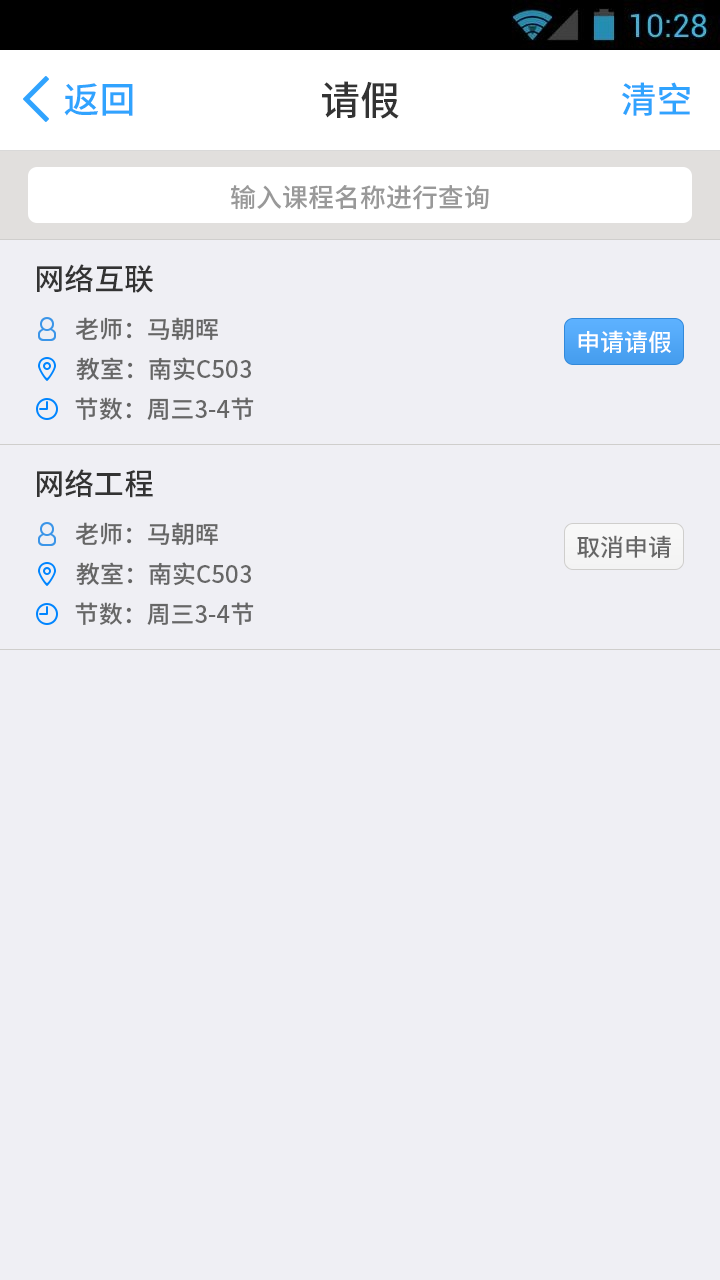
<style>
.page{position:relative;width:720px;height:1280px;background:#efeff4}
.page>*{position:absolute;margin:0}
.t1{font:36.1px "NotoSansHans-Medium";color:#30a3fe}
.t2{font:40px "NotoSansHans-Medium";color:#333333}
.t3{font:26px "NotoSansHans-Medium";color:#999999}
.t4{font:30px "NotoSansHans-Medium";color:#333333}
.t5{font:24px "NotoSansHans-Medium";color:#666666}
.t6{font:23.9px "NotoSansHans-Medium";color:#ffffff}
.t7{font:23.9px "NotoSansHans-Medium";color:#666666}
</style>
<div class="page">
<p class="t1" style="left:64px;top:83px;width:69px;height:33px">返回</p>
<p class="t2" style="left:322px;top:81px;width:77px;height:38px">请假</p>
<p class="t1" style="left:621px;top:82px;width:69px;height:34px">清空</p>
<p class="t3" style="left:231px;top:185px;width:258px;height:25px">输入课程名称进行查询</p>
<p class="t4" style="left:37px;top:264px;width:116px;height:29px">网络互联</p>
<p class="t5" style="left:75px;top:317px;width:143px;height:23px">老师：马朝晖</p>
<p class="t6" style="left:578px;top:330px;width:93px;height:23px">申请请假</p>
<p class="t5" style="left:76px;top:357px;width:175px;height:24px">教室：南实C503</p>
<p class="t5" style="left:75px;top:397px;width:179px;height:23px">节数：周三3-4节</p>
<p class="t4" style="left:37px;top:469px;width:116px;height:29px">网络工程</p>
<p class="t5" style="left:75px;top:522px;width:143px;height:23px">老师：马朝晖</p>
<p class="t7" style="left:577px;top:535px;width:94px;height:23px">取消申请</p>
<p class="t5" style="left:76px;top:562px;width:175px;height:24px">教室：南实C503</p>
<p class="t5" style="left:75px;top:602px;width:179px;height:23px">节数：周三3-4节</p>
</div>
